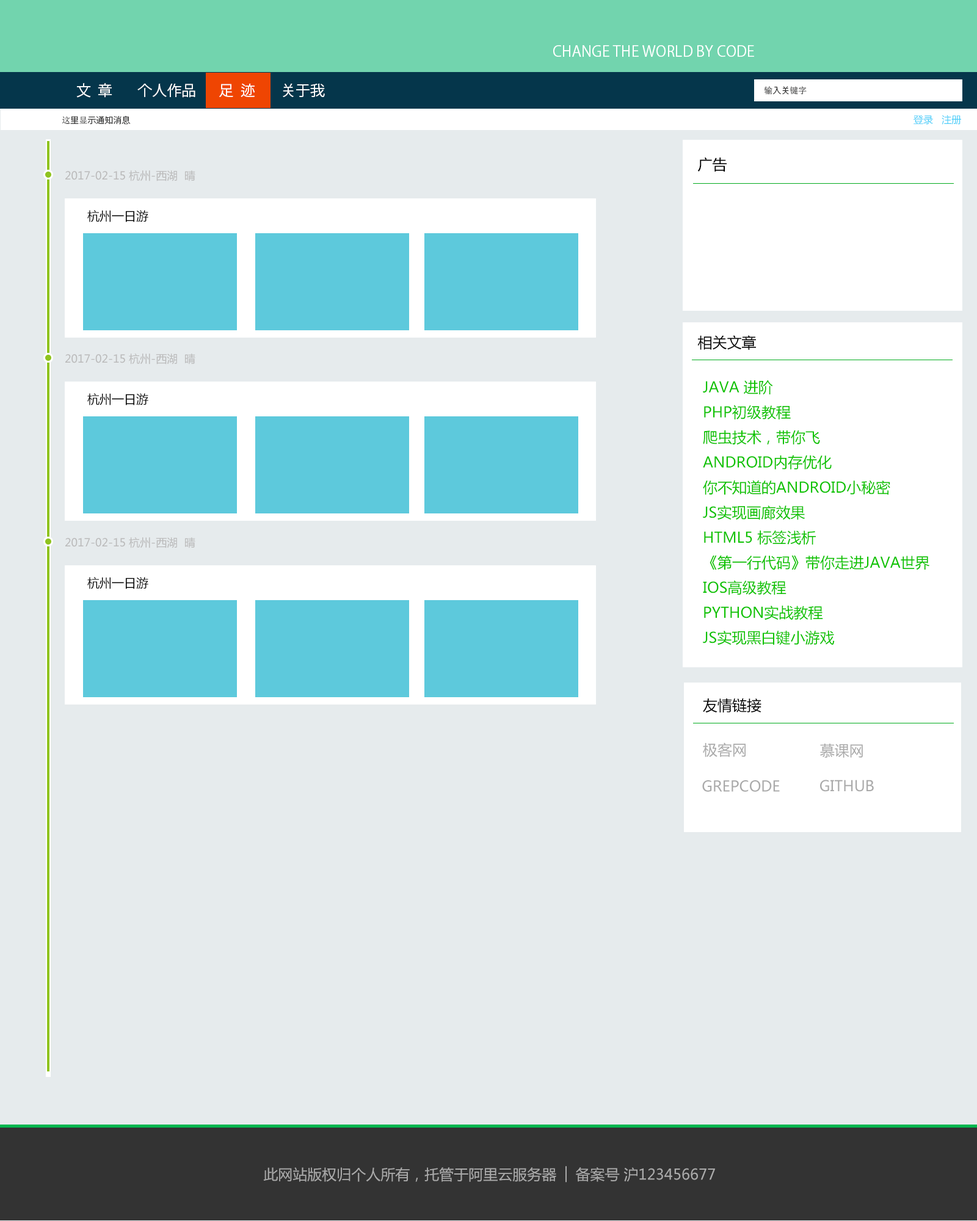
<style>
.page{position:relative;width:977px;height:1221px;background:#e6ebed}
.page>*{position:absolute;margin:0}
.t1{font:14.7px "KozGoPr6N-Regular";color:#ffffff;text-transform:uppercase}
.t2{font:8.5px "KozGoPr6N-Regular";color:#333333;text-transform:uppercase}
.t3{font:8.5px "SimSun";color:#333333;text-transform:uppercase}
.t4{font:9.8px "MicrosoftYaHei";color:#49cef9;text-transform:uppercase}
.t5{font:14.7px "MicrosoftYaHei";color:#000000;text-transform:uppercase}
.t6{font:11px "MicrosoftYaHei";color:#bababa;text-transform:uppercase}
.t7{font:12.2px "MicrosoftYaHei";color:#000000;text-transform:uppercase}
.t8{font:14.7px/25px "MicrosoftYaHei";color:#0ec300;text-transform:uppercase}
.t9{font:14.7px "MicrosoftYaHei";color:#aaaaaa;text-transform:uppercase}
</style>
<div class="page">
<p class="t1" style="left:553px;top:45px;width:201px;height:12px">change the world by Code</p>
<p class="t1" style="left:76px;top:83px;width:36px;height:15px">文  章</p>
<p class="t1" style="left:137px;top:84px;width:58px;height:14px">个人作品</p>
<p class="t1" style="left:219px;top:84px;width:36px;height:13px">足  迹</p>
<p class="t1" style="left:283px;top:83px;width:42px;height:14px">关于我</p>
<p class="t2" style="left:764px;top:86px;width:42px;height:9px"><span class="t3">输</span>入关<span class="t3">键字</span></p>
<p class="t2" style="left:62px;top:115px;width:69px;height:10px"><span class="t3">这</span>里<span class="t3">显</span>示通知消息</p>
<p class="t4" style="left:913px;top:115px;width:48px;height:10px">登录   注册</p>
<p class="t5" style="left:698px;top:157px;width:28px;height:15px">广告</p>
<p class="t6" style="left:65px;top:170px;width:130px;height:11px">2017-02-15 杭州-西湖  晴</p>
<p class="t7" style="left:87px;top:210px;width:61px;height:12px">杭州一日游</p>
<p class="t5" style="left:697px;top:335px;width:59px;height:15px">相关文章</p>
<p class="t6" style="left:65px;top:353px;width:130px;height:11px">2017-02-15 杭州-西湖  晴</p>
<p class="t8" style="left:703px;top:380px;width:227px;height:265px">Java 进阶<br>Php初级教程<br>爬虫技术，带你飞<br>Android内存优化<br>你不知道的Android小秘密<br>Js实现画廊效果<br>HTML5 标签浅析<br>《第一行代码》带你走进java世界<br>IOS高级教程<br>python实战教程<br>JS实现黑白键小游戏</p>
<p class="t7" style="left:87px;top:393px;width:61px;height:12px">杭州一日游</p>
<p class="t6" style="left:65px;top:537px;width:130px;height:11px">2017-02-15 杭州-西湖  晴</p>
<p class="t7" style="left:87px;top:577px;width:61px;height:12px">杭州一日游</p>
<p class="t5" style="left:703px;top:698px;width:58px;height:15px">友情链接</p>
<p class="t9" style="left:703px;top:742px;width:42px;height:15px">极客网</p>
<p class="t9" style="left:820px;top:744px;width:43px;height:14px">慕课网</p>
<p class="t9" style="left:702px;top:780px;width:78px;height:12px">GrepCode</p>
<p class="t9" style="left:820px;top:780px;width:54px;height:12px">Github</p>
<p class="t9" style="left:263px;top:1166px;width:452px;height:16px">此网站版权归个人所有，托管于阿里云服务器 │ 备案号 沪123456677</p>
</div>
